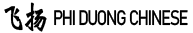
<style>
.page{position:relative;width:193px;height:33px;background:#ffffff}
.page>*{position:absolute;margin:0}
.t1{font:33.3px "CN-NguyBi";letter-spacing:-0.1em;color:#000000;font-weight:bold;scale:0.75 1}
.t2{font:20.8px "Bahnschrift";letter-spacing:-0.08em;color:#000000;scale:0.8 1}
</style>
<div class="page">
<p class="t1" style="left:4px;top:2px;width:43px;height:30px">飞扬</p>
<p class="t2" style="left:54px;top:10px;width:134px;height:16px">PHI DUONG CHINESE</p>
</div>
